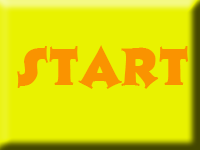
<style>
.page{position:relative;width:200px;height:150px;background:#e9f200}
.page>*{position:absolute;margin:0}
.t1{font:50px "Colbert";color:#fa9300}
</style>
<div class="page">
<p class="t1" style="left:17px;top:45px;width:172px;height:44px">START</p>
</div>
